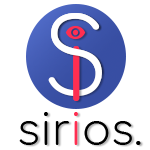
<style>
.page{position:relative;width:150px;height:150px;background:#ffffff}
.page>*{position:absolute;margin:0}
.t1{font:103.1px "Comfortaa-Light";color:#ffffff}
.t2{font:101.5px "Comfortaa-Light";color:#ff2e51}
.t3{font:42.6px "Comfortaa-Light";color:#000000}
.t4{font:42.6px "Comfortaa-Light";color:#ff2e51}
</style>
<div class="page">
<p class="t1" style="left:48px;top:13px;width:54px;height:83px">S</p>
<p class="t1" style="left:48px;top:13px;width:54px;height:83px">S</p>
<p class="t2" style="left:71px;top:25px;width:10px;height:76px">i</p>
<p class="t3" style="left:19px;top:112px;width:122px;height:33px">sir<span class="t4">i</span>os.</p>
</div>
